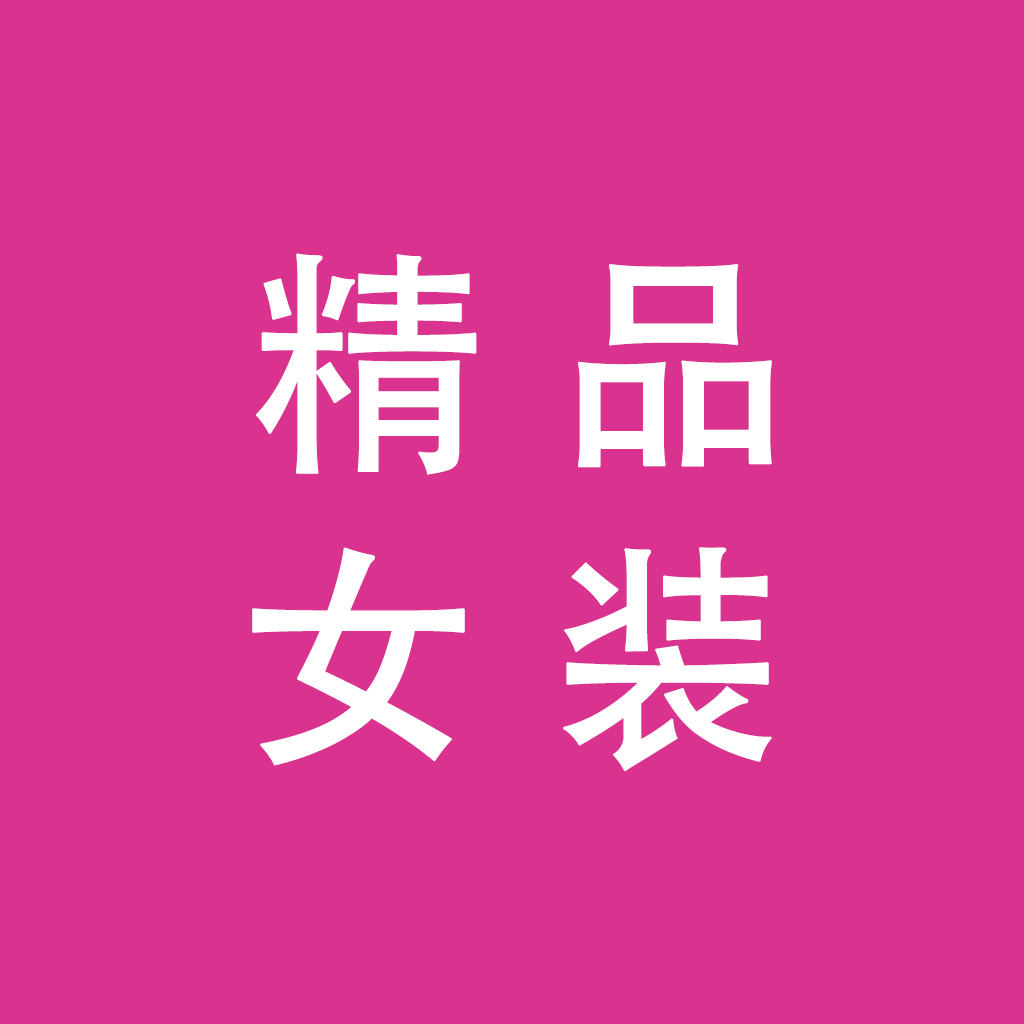
<style>
.page{position:relative;width:1024px;height:1024px;background:#d9338f}
.page>*{position:absolute;margin:0}
.t1{font:240px "AdobeHeitiStd-Regular";color:#ffffff;font-weight:bold}
</style>
<div class="page">
<p class="t1" style="left:255px;top:253px;width:517px;height:222px">精 品</p>
<p class="t1" style="left:252px;top:547px;width:520px;height:224px">女 装</p>
</div>
